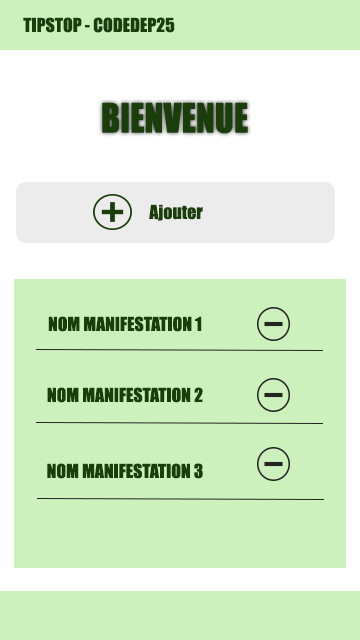
<style>
.page{position:relative;width:360px;height:640px;background:#cdf1bd}
.page>*{position:absolute;margin:0}
.t1{font:17.8px "Impact";color:#1a3e0a}
.t2{font:37.5px "Impact";color:#1a3e0a;scale:0.93 1}
</style>
<div class="page">
<p class="t1" style="left:23px;top:17px;width:152px;height:16px">TIPSTOP - CODEDEP25</p>
<p class="t2" style="left:102px;top:102px;width:146px;height:32px">BIENVENUE</p>
<p class="t1" style="left:149px;top:204px;width:54px;height:17px">Ajouter</p>
<p class="t1" style="left:48px;top:316px;width:154px;height:16px">NOM MANIFESTATION 1</p>
<p class="t1" style="left:47px;top:387px;width:156px;height:16px">NOM MANIFESTATION 2</p>
<p class="t1" style="left:47px;top:463px;width:156px;height:16px">NOM MANIFESTATION 3</p>
</div>
